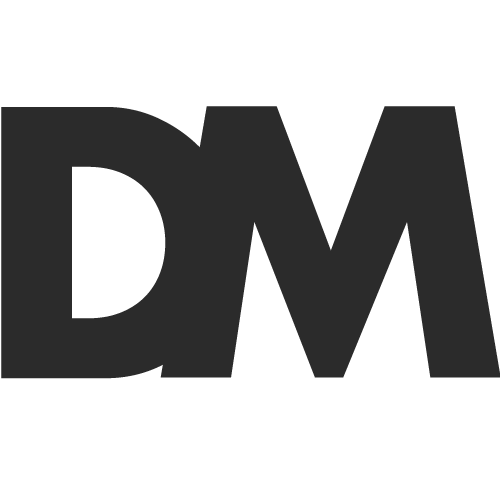
<style>
.page{position:relative;width:500px;height:500px;background:#ffffff}
.page>*{position:absolute;margin:0}
.t1{font:359.5px "Futura-Bold";color:#2b2b2b}
</style>
<div class="page">
<p class="t1" style="left:1px;top:107px;width:239px;height:272px">D</p>
<p class="t1" style="left:160px;top:106px;width:341px;height:272px">M</p>
</div>
